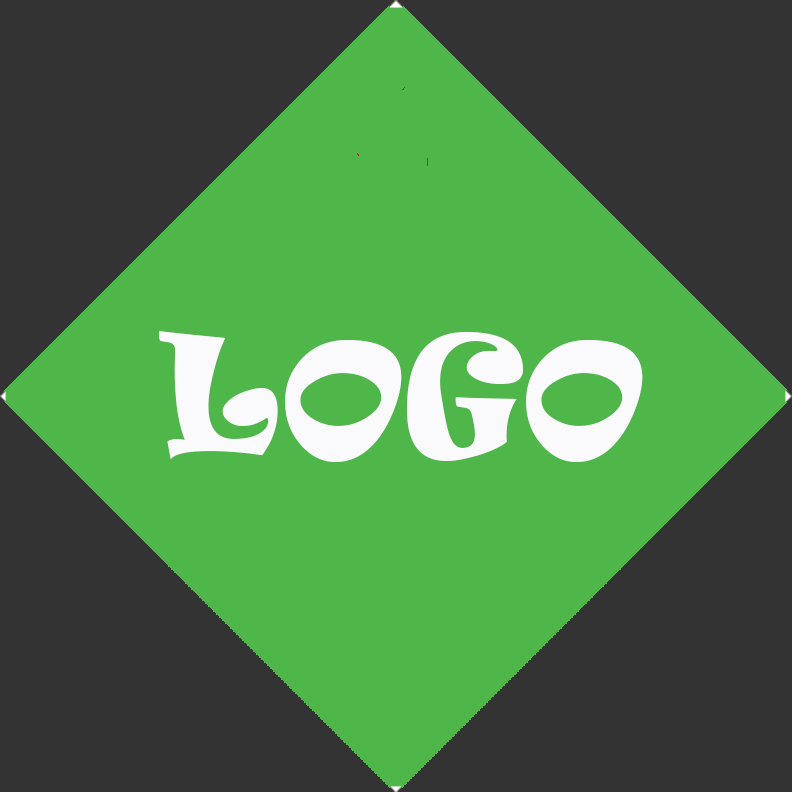
<style>
.page{position:relative;width:792px;height:792px;background:#333333}
.page>*{position:absolute;margin:0}
.t1{font:150px "Ravie";color:#fafafc}
</style>
<div class="page">
<p class="t1" style="left:159px;top:331px;width:484px;height:131px">LOGO</p>
</div>
